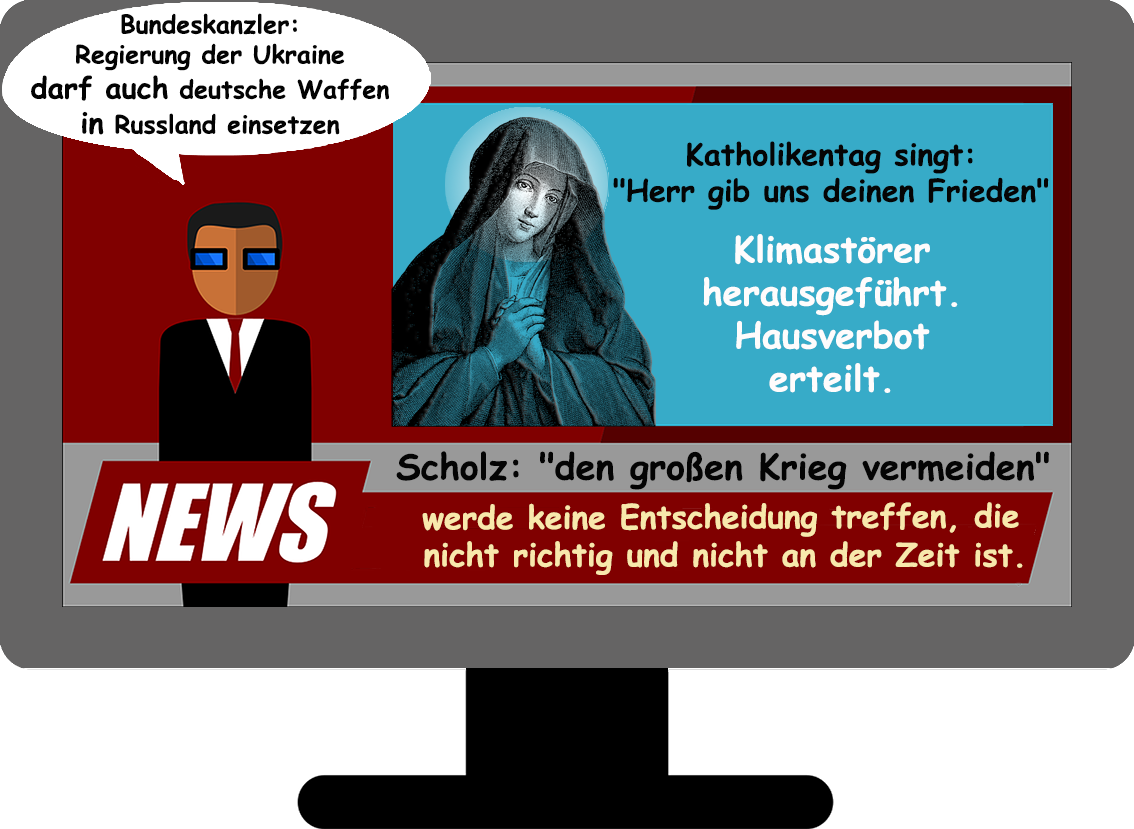
<style>
.page{position:relative;width:1134px;height:829px}
.page>*{position:absolute;margin:0}
.t1{font:25px "ComicSansMS-Bold";color:#030303}
.t2{font:29.2px "ComicSansMS-Bold";color:#030303}
.t3{font:30.2px "ComicSansMS-Bold";color:#050505}
.t4{font:35.8px "ComicSansMS-Bold";color:#fefcfc}
.t5{font:35.8px "ComicSansMS-Bold";color:#040404}
.t6{font:31.9px "ComicSansMS-Bold";color:#f8e8ac}
</style>
<div class="page">
<p class="t1" style="left:31px;top:13px;width:358px;height:122px;text-align:center">Bundeskanzler:<br>Regierung der Ukraine<br><span class="t2">darf auch</span> deutsche Waffen<br><span class="t2">in</span> Russland einsetzen</p>
<p class="t3" style="left:613px;top:141px;width:436px;height:69px;text-align:center">Katholikentag singt:<br>"Herr gib uns deinen Frieden"</p>
<p class="t4" style="left:703px;top:234px;width:255px;height:159px;text-align:center">Klimastörer<br>herausgeführt.<br>Hausverbot<br>erteilt.</p>
<p class="t5" style="left:396px;top:451px;width:653px;height:39px">Scholz: "den großen Krieg vermeiden"</p>
<p class="t6" style="left:422px;top:502px;width:597px;height:35px">werde keine Entscheidung treffen, die</p>
<p class="t6" style="left:424px;top:541px;width:599px;height:34px">nicht richtig und nicht an der Zeit ist.</p>
</div>
